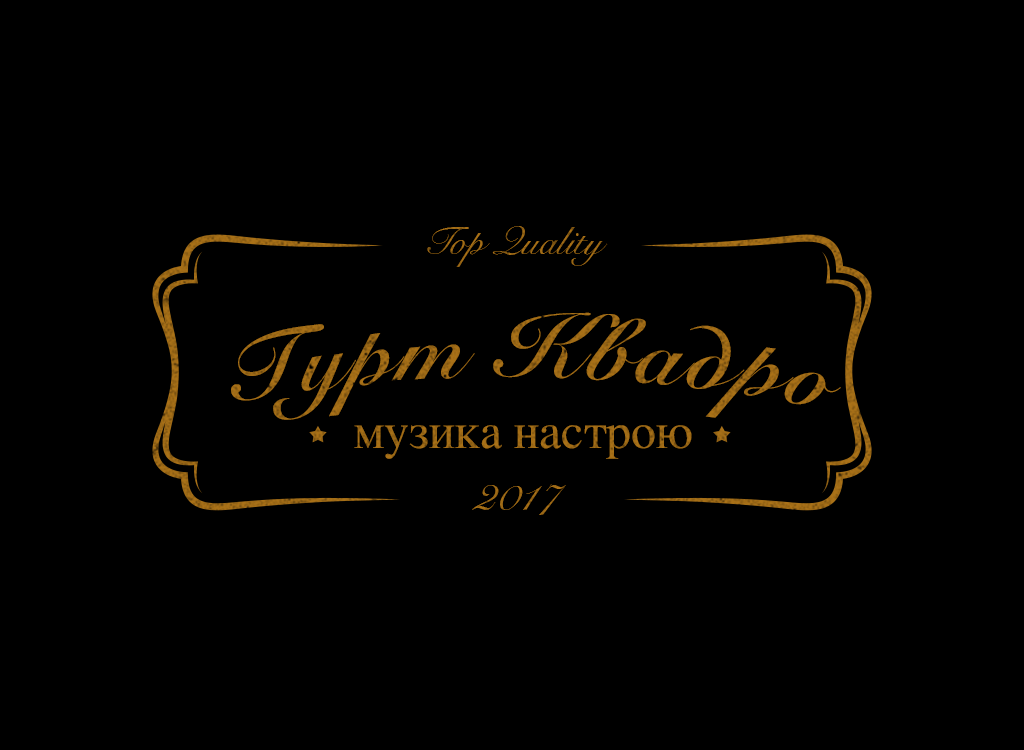
<style>
.page{position:relative;width:1024px;height:750px;background:#000000}
.page>*{position:absolute;margin:0}
.t1{font:39px "SnellRoundhand";color:#9c6916}
.t2{font:89.6px "SnellRoundhand-Bold";letter-spacing:0.046em;color:#9c6916}
.t3{font:49.9px "Times-Roman";color:#9d6916}
.t4{font:46.1px "SnellRoundhand";color:#9e6a16}
</style>
<div class="page">
<p class="t1" style="left:427px;top:226px;width:181px;height:41px">Top Quality</p>
<p class="t2" style="left:231px;top:312px;width:610px;height:108px">Гурт Квадро</p>
<p class="t3" style="left:354px;top:425px;width:338px;height:34px">музика настрою</p>
<p class="t4" style="left:472px;top:484px;width:94px;height:31px">2017</p>
</div>
